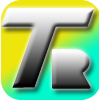
<style>
.page{position:relative;width:100px;height:100px}
.page>*{position:absolute;margin:0}
.t1{font:100px "Bauer";letter-spacing:0.075em}
</style>
<div class="page">
<p class="t1" style="left:1px;top:8px;width:94px;height:80px">T</p>
</div>
